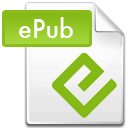
<style>
.page{position:relative;width:128px;height:128px;background:#ffffff}
.page>*{position:absolute;margin:0}
.t1{font:25px "Futura-Medium";color:#ffffff}
</style>
<div class="page">
<p class="t1" style="left:19px;top:17px;width:54px;height:21px">ePub</p>
</div>
